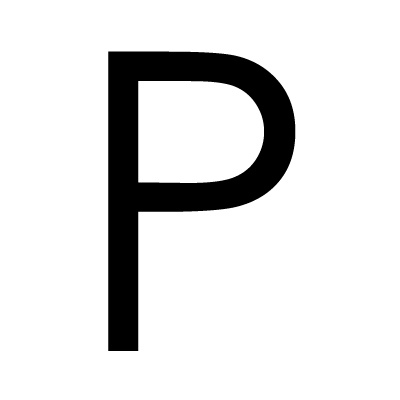
<style>
.page{position:relative;width:400px;height:400px;background:#ffffff}
.page>*{position:absolute;margin:0}
.t1{font:416.7px "CenturyGothic";color:#000000}
</style>
<div class="page">
<p class="t1" style="left:108px;top:51px;width:188px;height:300px">P</p>
</div>
